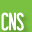
<style>
.page{position:relative;width:32px;height:32px;background:#7ac141}
.page>*{position:absolute;margin:0}
.t1{font:24px "LibelSuit";color:#ffffff}
</style>
<div class="page">
<p class="t1" style="left:1px;top:12px;width:23px;height:19px">CNS</p>
</div>
